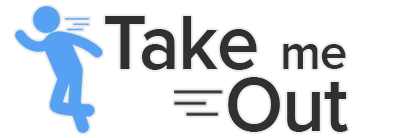
<style>
.page{position:relative;width:406px;height:138px;background:#ffffff}
.page>*{position:absolute;margin:0}
.t1{font:80px "ProximaNova-Semibold";letter-spacing:-0.017em;color:#303030;scale:0.95 1}
.t2{font:52px "ProximaNova-Semibold";letter-spacing:-0.017em;color:#303030;scale:0.95 1}
</style>
<div class="page">
<p class="t1" style="left:105px;top:16px;width:152px;height:54px">Take</p>
<p class="t2" style="left:283px;top:44px;width:63px;height:25px">me</p>
<p class="t1" style="left:228px;top:77px;width:120px;height:55px">Out</p>
</div>
